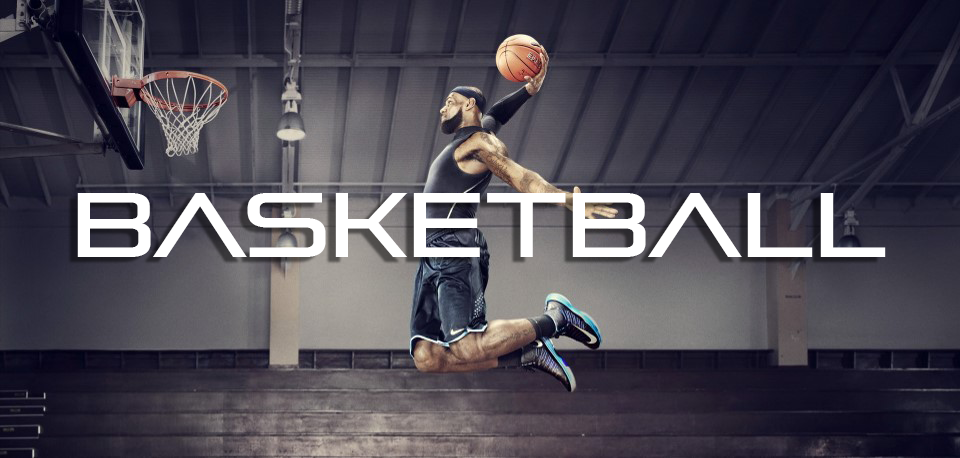
<style>
.page{position:relative;width:960px;height:458px}
.page>*{position:absolute;margin:0}
.t1{font:91.3px "PirulenRg-Regular";color:#ffffff}
</style>
<div class="page">
<p class="t1" style="left:77px;top:193px;width:809px;height:64px">Basketball</p>
</div>
